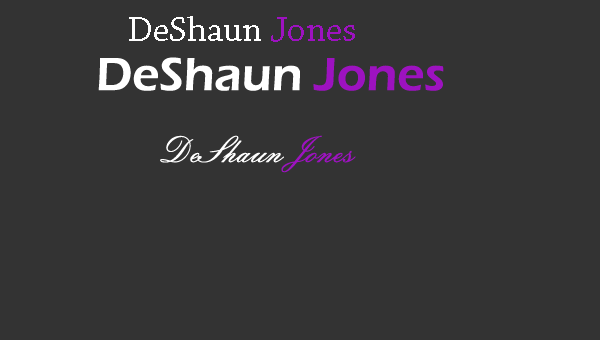
<style>
.page{position:relative;width:600px;height:340px;background:#333333}
.page>*{position:absolute;margin:0}
.t1{font:36px "ChaparralPro-Regular";color:#ffffff}
.t2{font:36px "ChaparralPro-Regular";color:#9d12c0}
.t3{font:48px "ErasITC-Demi";color:#ffffff}
.t4{font:48px "ErasITC-Demi";color:#9d12c0}
.t5{font:36px "EmbassyBT-Regular";color:#ffffff}
.t6{font:36px "EmbassyBT-Regular";color:#9d12c0}
</style>
<div class="page">
<p class="t1" style="left:129px;top:16px;width:226px;height:26px">DeShaun <span class="t2">Jones</span></p>
<p class="t3" style="left:98px;top:57px;width:346px;height:34px">DeShaun <span class="t4">Jones</span></p>
<p class="t5" style="left:160px;top:135px;width:196px;height:38px">DeShaun <span class="t6">Jones</span></p>
</div>
